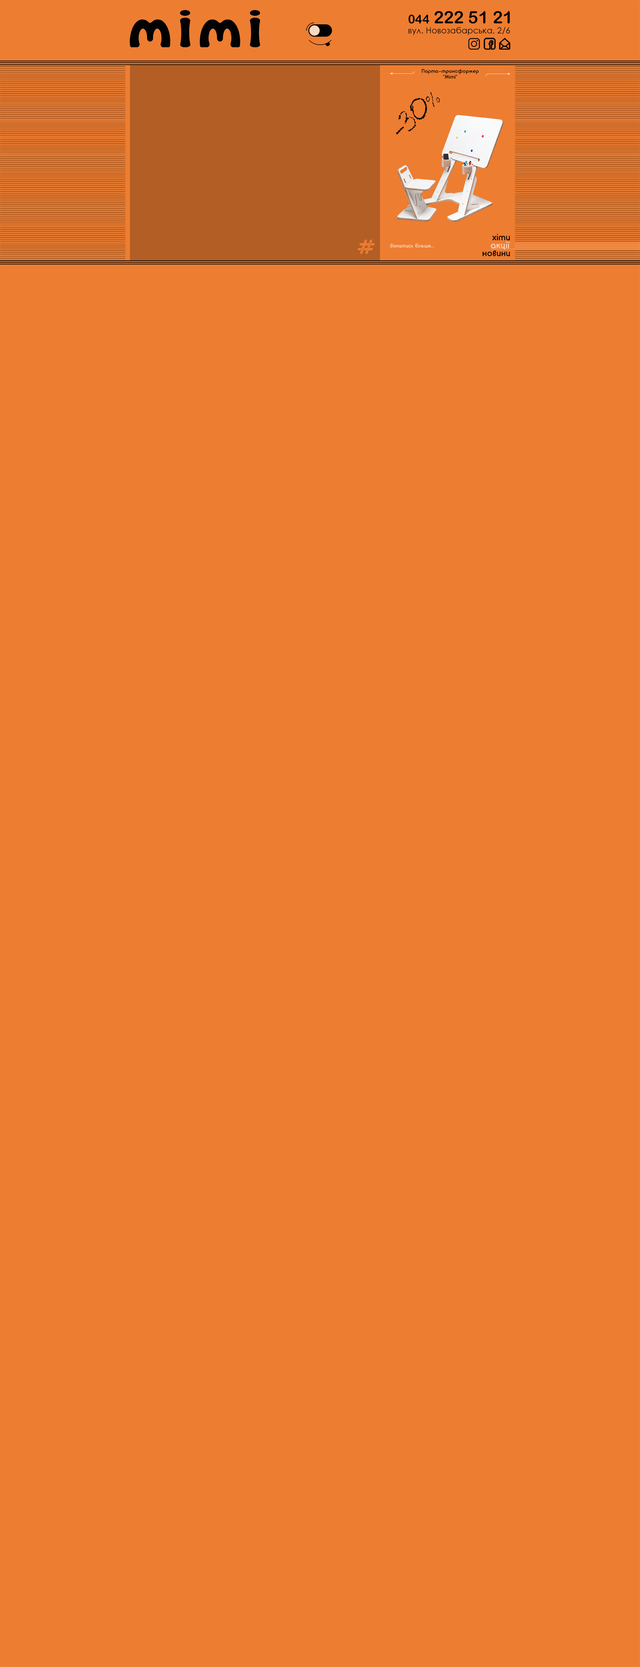
<style>
.page{position:relative;width:640px;height:1667px;background:#ed7d31}
.page>*{position:absolute;margin:0}
.t1{font:17px "ArialRoundedMTBold";color:#000000}
.t2{font:12px "ArialRoundedMTBold";color:#000000}
.t3{font:8.3px "CenturyGothic";letter-spacing:0.007em;color:#000000}
.t4{font:5px/5.7px "ArciformSanscyr-lat-Regular";letter-spacing:0.075em;color:#000000}
.t5{font:21.3px "LCChalk";color:#000000}
.t6{font:9px "ArciformSanscyr-lat-Regular";letter-spacing:0.05em;color:#000000}
.t7{font:5px "ArciformSanscyr-lat-Regular";letter-spacing:0.05em;color:#fad9c2}
.t8{font:9px "ArciformSanscyr-lat-Regular";letter-spacing:0.05em;color:#fad9c2}
</style>
<div class="page">
<p class="t1" style="left:408px;top:11px;width:102px;height:13px"><span class="t2">044 </span>222 51 21</p>
<p class="t3" style="left:408px;top:27px;width:102px;height:8px">вул. Новозабарська, 2/6</p>
<p class="t4" style="left:422px;top:69px;width:57px;height:10px;text-align:center">Парта-трансформер <br>«Mimi»</p>
<p class="t5" style="left:396px;top:91px;width:44px;height:44px;rotate:-45deg">-30%</p>
<p class="t6" style="left:492px;top:234px;width:18px;height:6px">хіти</p>
<p class="t7" style="left:390px;top:244px;width:44px;height:4px">дізнатись більше...</p>
<p class="t8" style="left:491px;top:242px;width:19px;height:8px">акції</p>
<p class="t6" style="left:482px;top:250px;width:28px;height:6px">новини</p>
</div>
